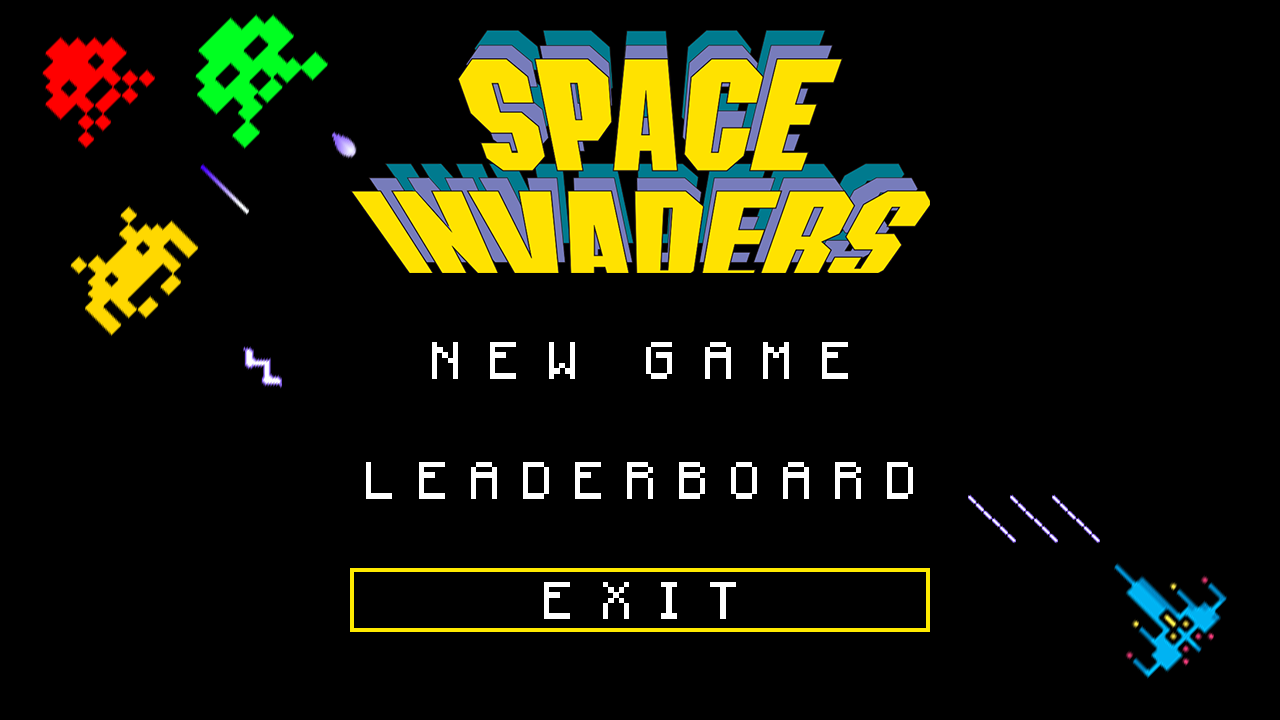
<style>
.page{position:relative;width:1280px;height:720px;background:#000000}
.page>*{position:absolute;margin:0}
.t1{font:41.7px "Minecraftia-Regular";letter-spacing:0.66em;color:#ffffff}
.t2{font:41.7px "Minecraftia-Regular";letter-spacing:0.5em;color:#ffffff}
</style>
<div class="page">
<p class="t1" style="left:432px;top:342px;width:416px;height:37px">NEW GAME</p>
<p class="t2" style="left:366px;top:462px;width:547px;height:37px">LEADERBOARD</p>
<p class="t1" style="left:544px;top:582px;width:192px;height:37px">EXIT</p>
</div>
